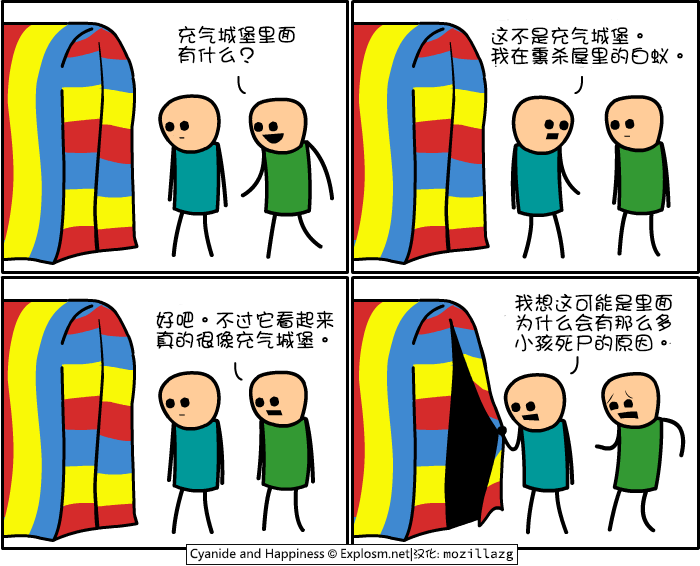
<style>
.page{position:relative;width:700px;height:566px;background:#ffffff}
.page>*{position:absolute;margin:0}
.t1{font:20px/20px "DFGirl";color:#000000}
</style>
<div class="page">
<p class="t1" style="left:178px;top:25px;width:118px;height:39px">充气城堡里面<br>有什么？</p>
<p class="t1" style="left:490px;top:26px;width:193px;height:39px">这不是充气城堡。<br>我在熏杀屋里的白蚁。</p>
<p class="t1" style="left:514px;top:293px;width:159px;height:59px">我想这可能是里面<br>为什么会有那么多<br>小孩死尸的原因。</p>
<p class="t1" style="left:156px;top:310px;width:178px;height:39px">好吧。不过它看起来<br>真的很像充气城堡。</p>
</div>
